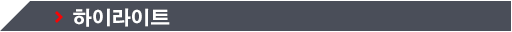
<style>
.page{position:relative;width:512px;height:32px;background:#4a4e59}
.page>*{position:absolute;margin:0}
.t1{font:19.4px "AdobeGothicStd-Bold";color:#ffffff}
</style>
<div class="page">
<p class="t1" style="left:73px;top:8px;width:97px;height:19px">하이라이트</p>
</div>
